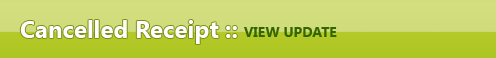
<style>
.page{position:relative;width:496px;height:58px}
.page>*{position:absolute;margin:0}
.t1{font:24px "SegoeUI-Bold";color:#fefefe}
.t2{font:14px "SegoeUI-Bold";color:#336600}
</style>
<div class="page">
<p class="t1" style="left:20px;top:20px;width:217px;height:24px">Cancelled Receipt ::</p>
<p class="t2" style="left:244px;top:27px;width:93px;height:10px">VIEW UPDATE</p>
</div>
